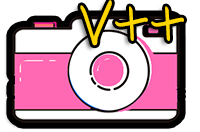
<style>
.page{position:relative;width:200px;height:132px;background:#ffffff}
.page>*{position:absolute;margin:0}
.t1{font:56.5px "SketchFlowPrint";color:#ffd700}
</style>
<div class="page">
<p class="t1" style="left:80px;top:0px;width:104px;height:46px">V++</p>
</div>
